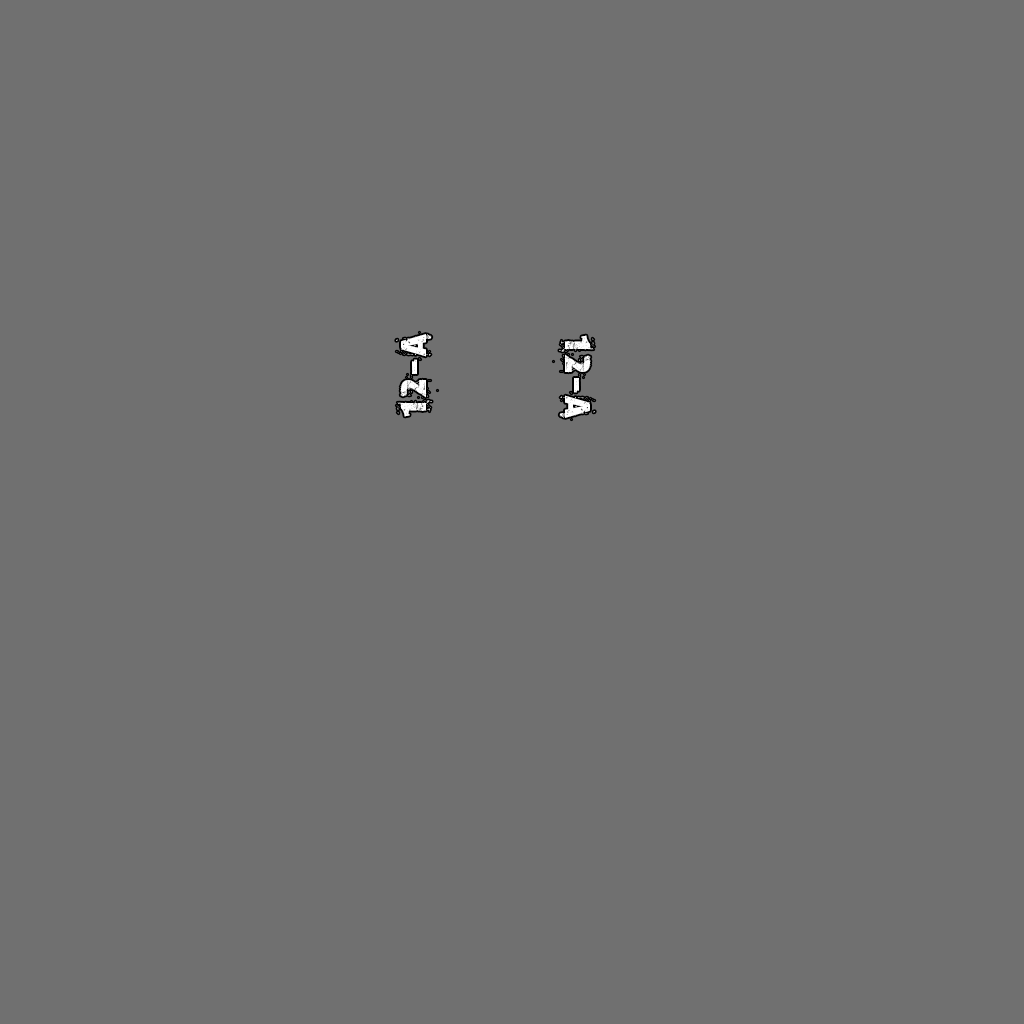
<style>
.page{position:relative;width:1024px;height:1024px;background:#707070}
.page>*{position:absolute;margin:0}
.t1{font:36.1px "Formfound.com";letter-spacing:0.025em;color:#ffffff;scale:0.93 1}
</style>
<div class="page">
<p class="t1" style="left:396px;top:332px;width:42px;height:85px;rotate:-90deg">12-A</p>
<p class="t1" style="left:553px;top:335px;width:42px;height:85px;rotate:90deg">12-A</p>
</div>
